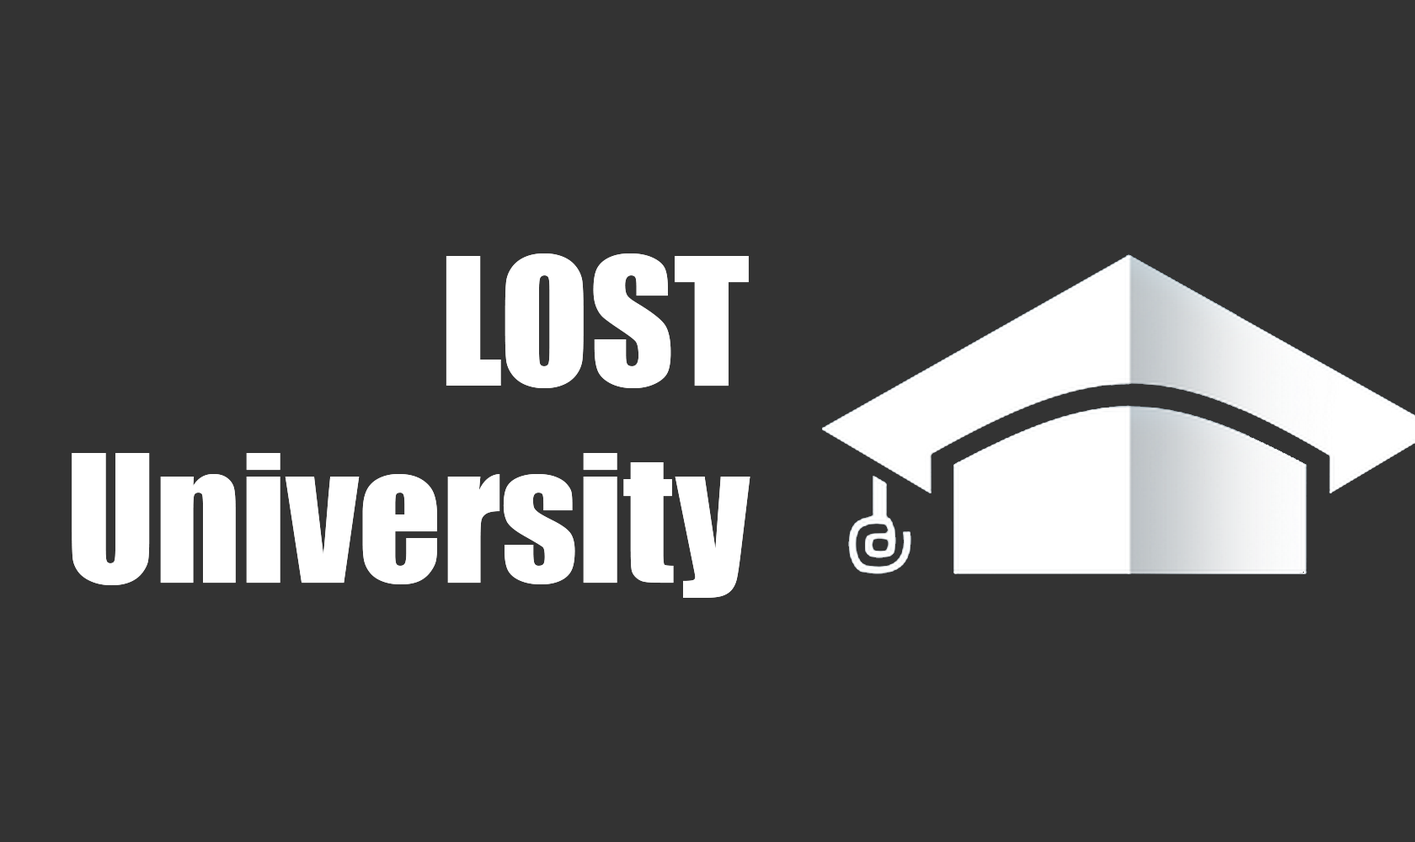
<style>
.page{position:relative;width:1415px;height:842px;background:#333333}
.page>*{position:absolute;margin:0}
.t1{font:164.3px "Impact";color:#ffffff}
</style>
<div class="page">
<p class="t1" style="left:72px;top:254px;width:679px;height:344px;text-align:right">LOST<br>University</p>
</div>
